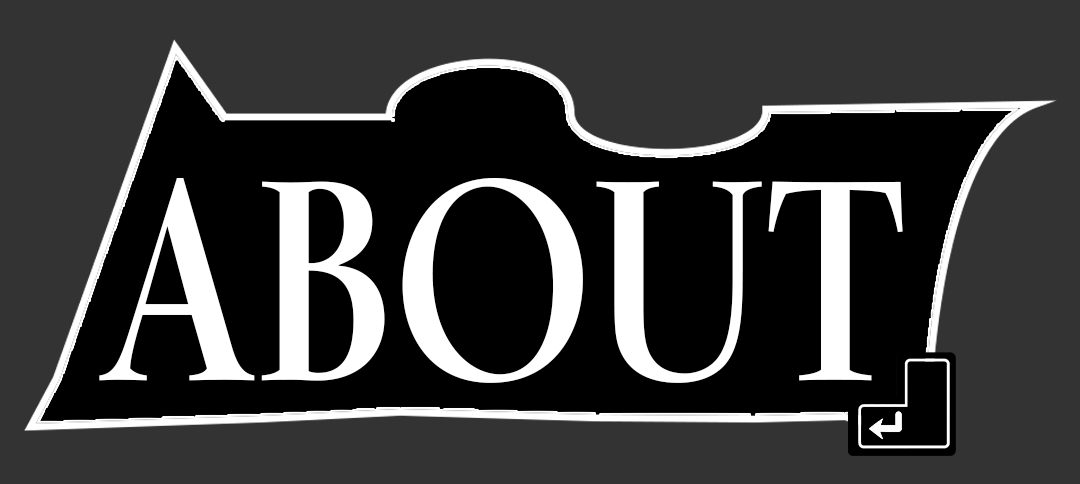
<style>
.page{position:relative;width:1080px;height:484px;background:#333333}
.page>*{position:absolute;margin:0}
.t1{font:282.9px "KumlienPro-Condensed";color:#ffffff}
</style>
<div class="page">
<p class="t1" style="left:99px;top:178px;width:804px;height:205px">ABOUT</p>
</div>
